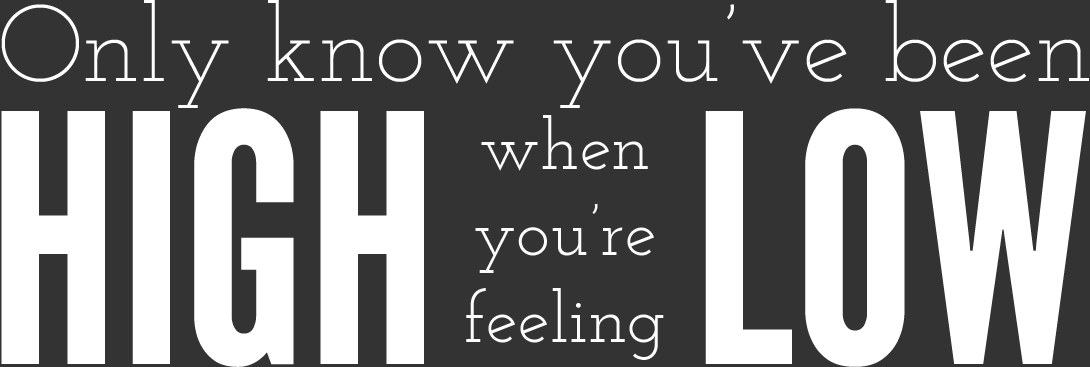
<style>
.page{position:relative;width:1090px;height:367px;background:#333333}
.page>*{position:absolute;margin:0}
.t1{font:108px "JosefinSlab-Light";color:#ffffff}
.t2{font:344px "LeagueGothic-Regular";color:#ffffff}
.t3{font:72px "JosefinSlab";color:#fdfdfd}
</style>
<div class="page">
<p class="t1" style="left:1px;top:0px;width:1088px;height:108px">Only know you’ve been</p>
<p class="t2" style="left:1px;top:108px;width:423px;height:259px">HIGH</p>
<p class="t2" style="left:705px;top:108px;width:381px;height:259px">LOW</p>
<p class="t3" style="left:466px;top:115px;width:198px;height:245px;text-align:center">when<br>you’re<br>feeling</p>
</div>
